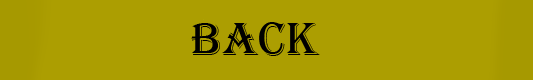
<style>
.page{position:relative;width:533px;height:80px;background:#ac9e01}
.page>*{position:absolute;margin:0}
.t1{font:48px "Algerian";color:#000000}
</style>
<div class="page">
<p class="t1" style="left:191px;top:22px;width:129px;height:34px">back</p>
</div>
